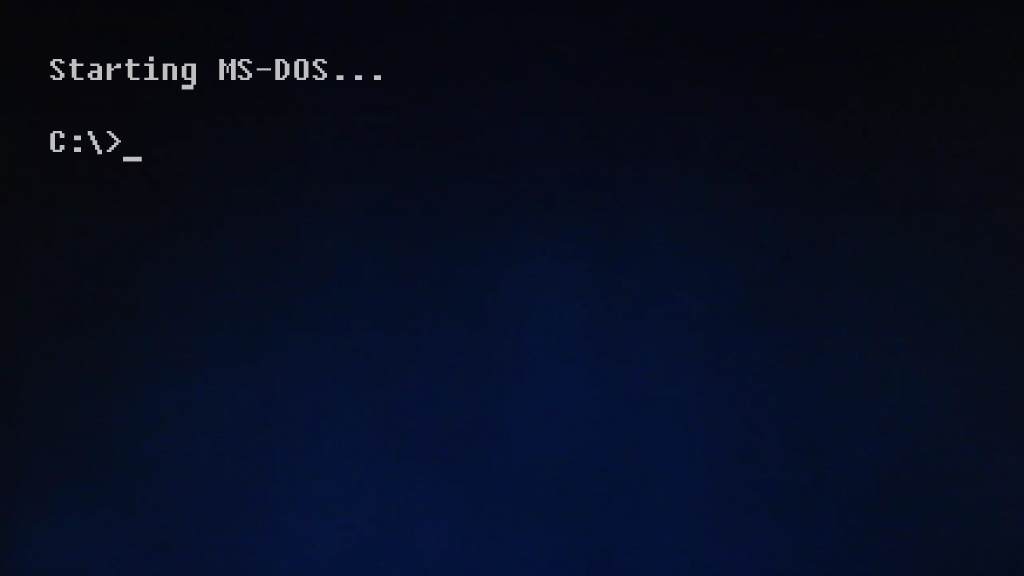
<style>
.page{position:relative;width:1024px;height:576px}
.page>*{position:absolute;margin:0}
.t1{font:30px "Fixedsys";color:#c0c0c0}
</style>
<div class="page">
<p class="t1" style="left:50px;top:56px;width:331px;height:106px">Starting MS-DOS...<br><br>C:\&gt;_</p>
</div>
